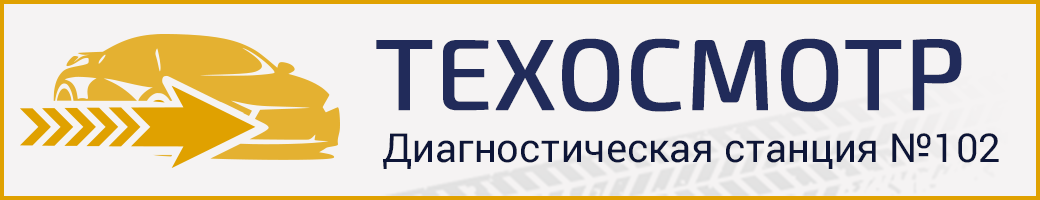
<style>
.page{position:relative;width:1040px;height:200px;background:#f5f3f3}
.page>*{position:absolute;margin:0}
.t1{font:100px "Exo2.0-Regular";color:#212b5a;text-transform:uppercase;font-weight:bold}
.t2{font:40px "Roboto-Regular";color:#0d1537}
</style>
<div class="page">
<p class="t1" style="left:376px;top:38px;width:586px;height:74px">Техосмотр</p>
<p class="t2" style="left:383px;top:133px;width:616px;height:36px">Диагностическая станция №102</p>
</div>
